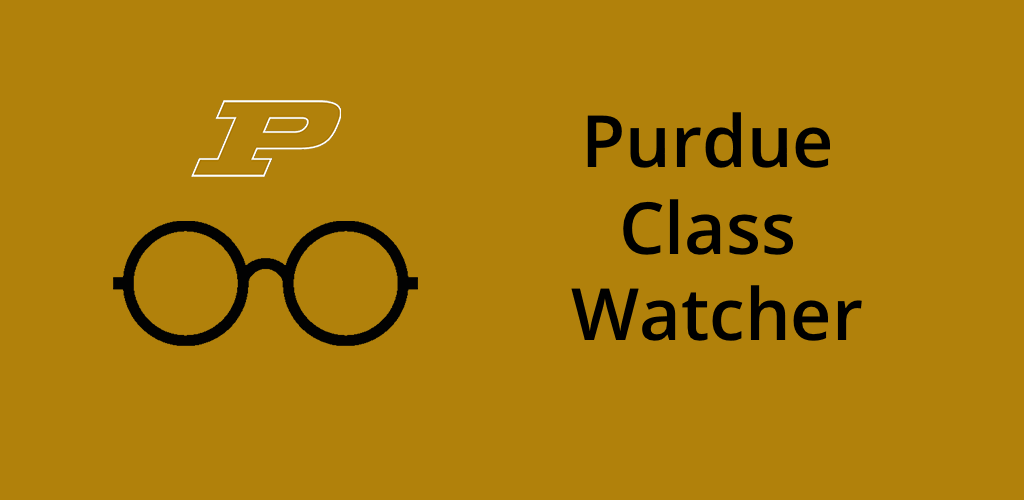
<style>
.page{position:relative;width:1024px;height:500px;background:#b1810b}
.page>*{position:absolute;margin:0}
.t1{font:72px "OpenSans-Semibold";color:#000000}
</style>
<div class="page">
<p class="t1" style="left:571px;top:112px;width:291px;height:229px;text-align:center">Purdue <br>Class <br>Watcher</p>
</div>
